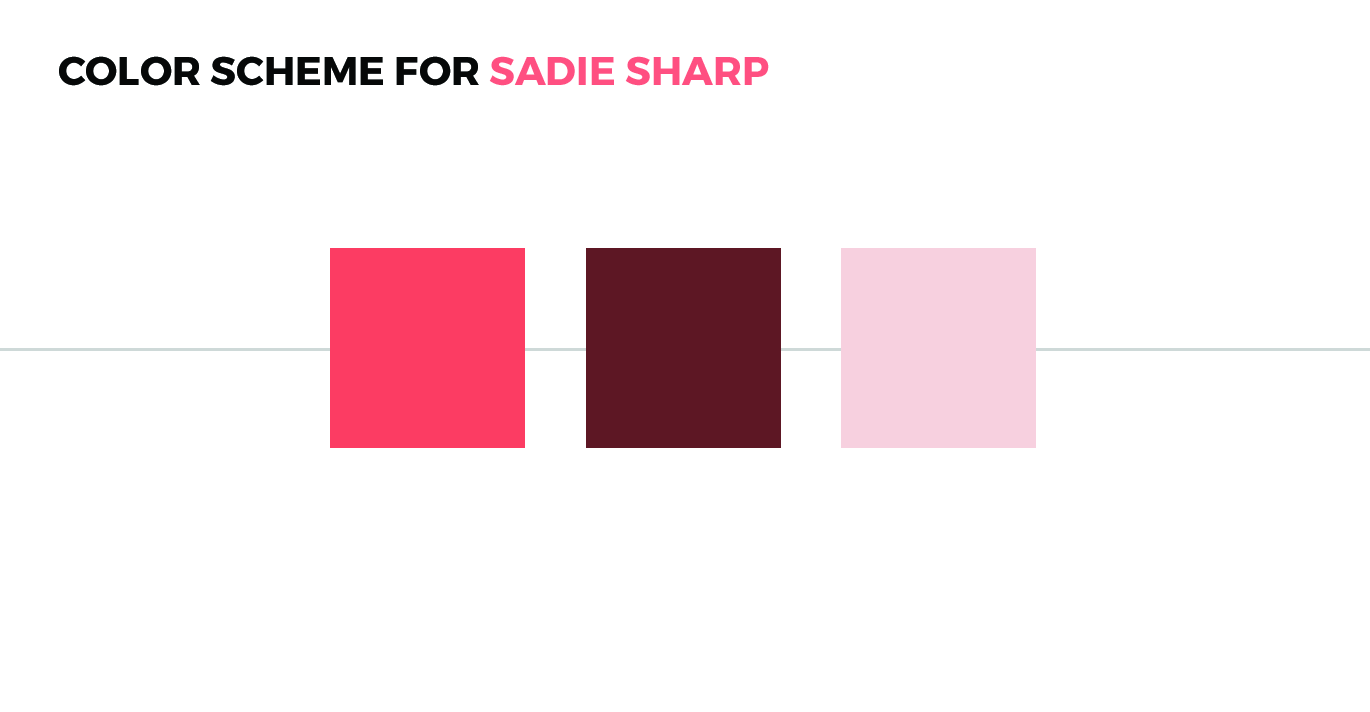
<style>
.page{position:relative;width:1370px;height:712px;background:#ffffff}
.page>*{position:absolute;margin:0}
.t1{font:40px "Montserrat-Bold";color:#060808;text-transform:uppercase}
.t2{font:40px "Montserrat-Bold";color:#ff4f81;text-transform:uppercase}
</style>
<div class="page">
<p class="t1" style="left:59px;top:56px;width:710px;height:30px">Color Scheme for <span class="t2">SADIE SHARP</span></p>
</div>
